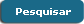
<style>
.page{position:relative;width:84px;height:24px;background:#1a6988}
.page>*{position:absolute;margin:0}
.t1{font:10px "Verdana-Bold";color:#ffffff}
</style>
<div class="page">
<p class="t1" style="left:16px;top:8px;width:55px;height:9px">Pesquisar</p>
</div>
